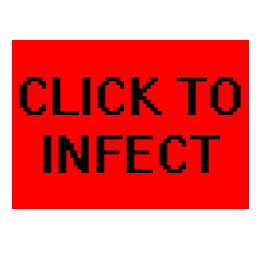
<style>
.page{position:relative;width:256px;height:256px;background:#ff0000}
.page>*{position:absolute;margin:0}
.t1{font:48px "System";color:#010101}
</style>
<div class="page">
<p class="t1" style="left:19px;top:77px;width:222px;height:96px;text-align:center">CLICK TO<br>INFECT</p>
</div>
